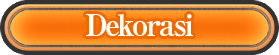
<style>
.page{position:relative;width:279px;height:55px}
.page>*{position:absolute;margin:0}
.t1{font:30px "RyuminPro-ExBold";letter-spacing:-0.08em;color:#fffff7}
</style>
<div class="page">
<p class="t1" style="left:86px;top:14px;width:107px;height:23px">Dekorasi</p>
</div>
